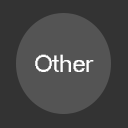
<style>
.page{position:relative;width:128px;height:128px;background:#333333}
.page>*{position:absolute;margin:0}
.t1{font:24px "MS Sans Serif";color:#ffffff}
</style>
<div class="page">
<p class="t1" style="left:35px;top:54px;width:59px;height:18px">Other</p>
</div>
